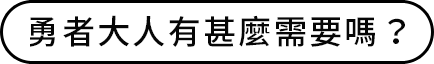
<style>
.page{position:relative;width:434px;height:64px;background:#ffffff}
.page>*{position:absolute;margin:0}
.t1{font:33.3px "NotoSansCJKtc-Medium";letter-spacing:0.06em;color:#060606}
</style>
<div class="page">
<p class="t1" style="left:28px;top:15px;width:377px;height:32px">勇者大人有甚麼需要嗎？</p>
</div>
